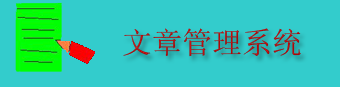
<style>
.page{position:relative;width:340px;height:87px;background:#33cccc}
.page>*{position:absolute;margin:0}
.t1{font:30px "SimSun";color:#b60c0d}
</style>
<div class="page">
<p class="t1" style="left:123px;top:28px;width:178px;height:29px">文章管理系统</p>
</div>
